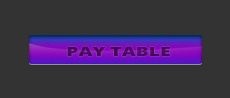
<style>
.page{position:relative;width:230px;height:98px;background:#333333}
.page>*{position:absolute;margin:0}
.t1{font:12.7px "OpenSans-Extrabold";color:#46085c;scale:1.53 1}
</style>
<div class="page">
<p class="t1" style="left:67px;top:46px;width:103px;height:10px">PAY TABLE</p>
<p class="t1" style="left:67px;top:46px;width:103px;height:10px">PAY TABLE</p>
</div>
